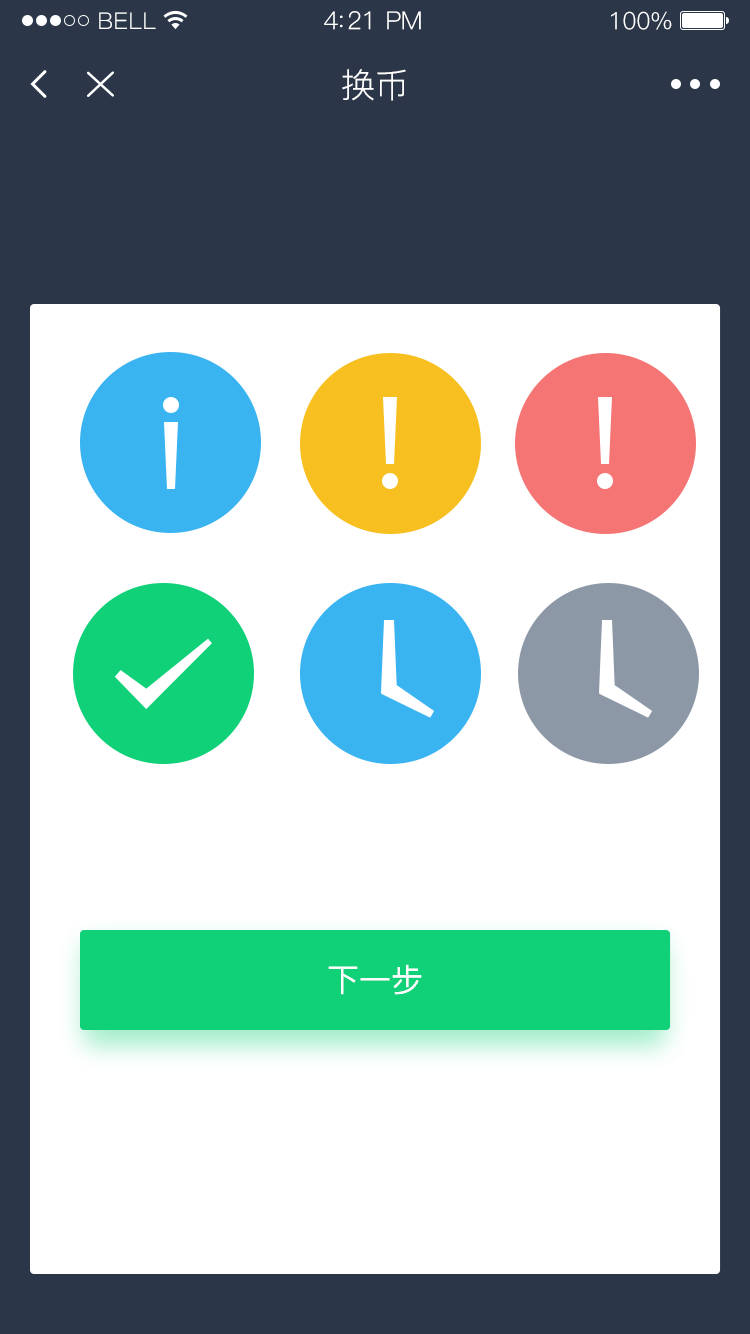
<style>
.page{position:relative;width:750px;height:1334px;background:#ffffff}
.page>*{position:absolute;margin:0}
.t1{font:23px "PingFang-SC-Regular";letter-spacing:0.02em;color:#ffffff}
.t2{font:25px "PingFang-SC-Regular";letter-spacing:-0.02em;color:#ffffff}
.t3{font:24px "PingFang-SC-Regular";letter-spacing:-0.02em;color:#ffffff}
.t4{font:34px "PingFang-SC-Regular";color:#ffffff}
.t5{font:32px "PingFang-SC-Medium";color:#ffffff}
</style>
<div class="page">
<p class="t1" style="left:99px;top:12px;width:57px;height:17px">BELL</p>
<p class="t2" style="left:324px;top:11px;width:97px;height:19px">4:21 PM</p>
<p class="t3" style="left:611px;top:11px;width:61px;height:19px">100%</p>
<p class="t4" style="left:342px;top:69px;width:64px;height:32px">换币</p>
<p class="t5" style="left:328px;top:964px;width:94px;height:31px">下一步</p>
</div>
